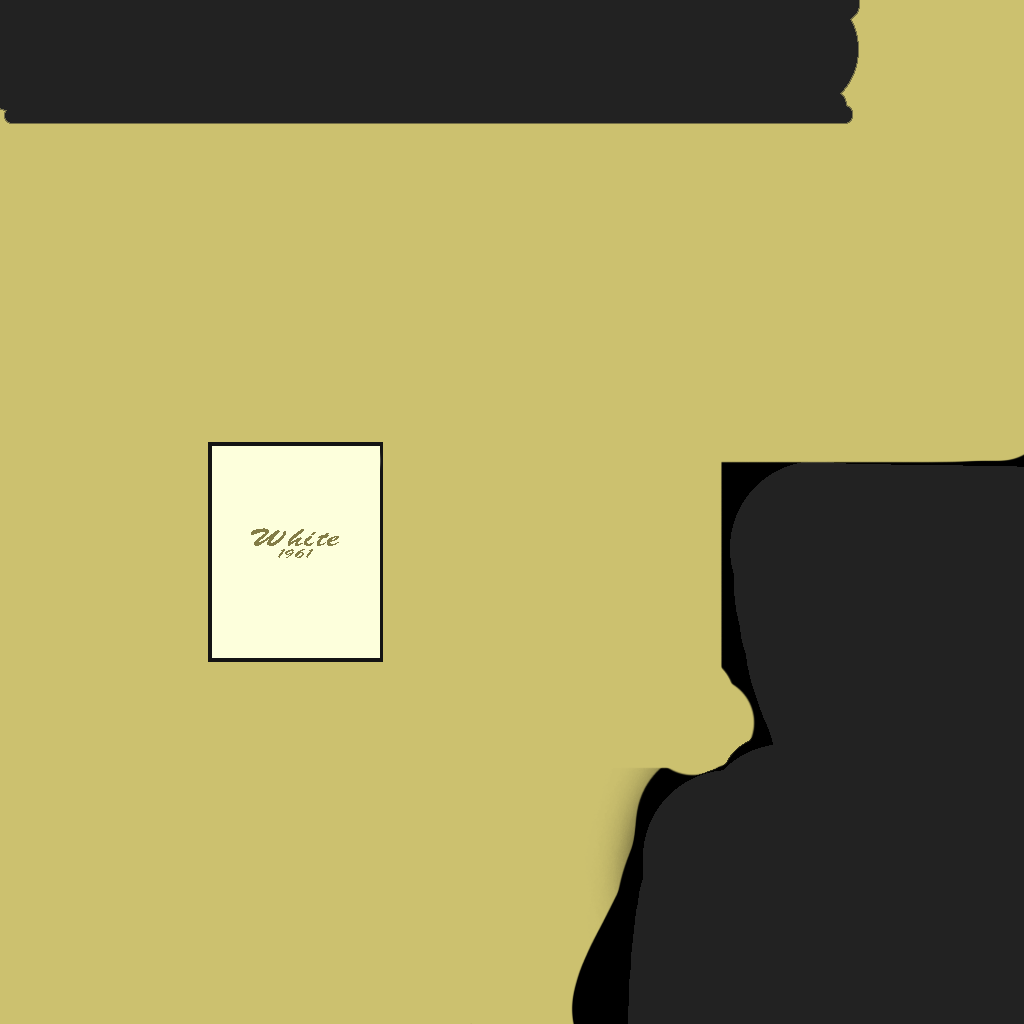
<style>
.page{position:relative;width:1024px;height:1024px;background:#ccc16f}
.page>*{position:absolute;margin:0}
.t1{font:21.8px "Brussels";color:#837c46;scale:1.53 1}
.t2{font:10.9px "Brussels";color:#837c46;scale:1.53 1}
</style>
<div class="page">
<p class="t1" style="left:251px;top:528px;width:88px;height:18px">White</p>
<p class="t2" style="left:278px;top:549px;width:35px;height:9px">1961</p>
</div>
